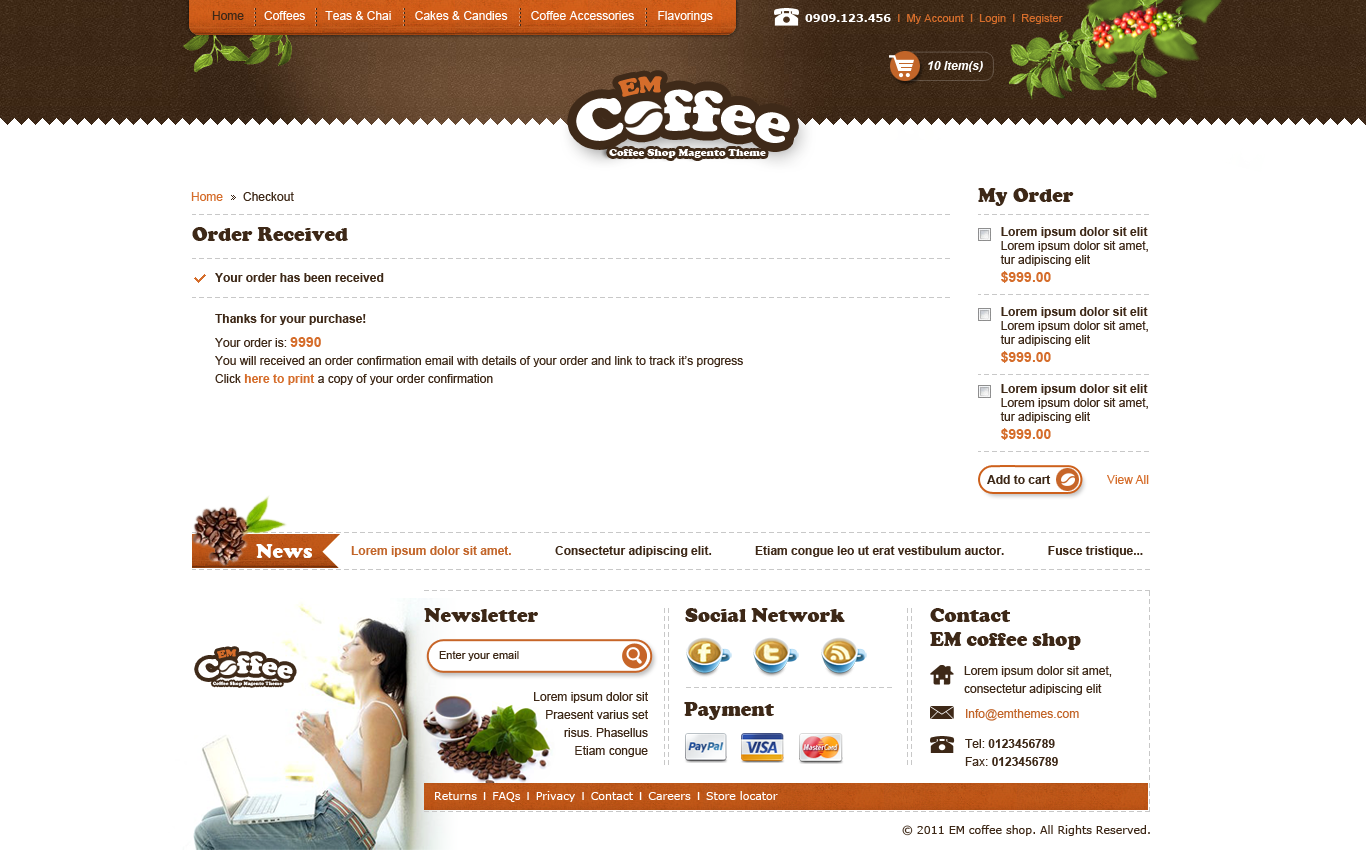
<style>
.page{position:relative;width:1366px;height:850px;background:#ffffff}
.page>*{position:absolute;margin:0}
.t1{font:12px "ArialMT";color:#fefefe}
.t2{font:12px "ArialMT";color:#3d2817}
.t3{font:11px "ArialMT";color:#d56d2b}
.t4{font:11px "Verdana-Bold";color:#ffffff}
.t5{font:12px "Arial-BoldItalicMT";color:#ffffff}
.t6{font:12px "ArialMT";color:#d56d2b}
.t7{font:20px "CooperBlack";color:#3d2817}
.t8{font:12px/14px "ArialMT";color:#3d2817}
.t9{font:12px/14px "Arial-BoldMT";color:#3d2817}
.t10{font:14px/18px "Arial-BoldMT";color:#d56d2b}
.t11{font:12px "Arial-BoldMT";color:#3d2817}
.t12{font:12px/18px "ArialMT";color:#3d2817}
.t13{font:12px/24px "Arial-BoldMT";color:#3d2817}
.t14{font:12px/24px "ArialMT";color:#3d2817}
.t15{font:14px/24px "Arial-BoldMT";color:#d56d2b}
.t16{font:12px/18px "Arial-BoldMT";color:#d56d2b}
.t17{font:20px "CooperBlack";color:#ffffff}
.t18{font:12px "Arial-BoldMT";color:#c26529}
.t19{font:20px/24px "CooperBlack";color:#3d2817}
.t20{font:11px "ArialMT";color:#3d2817}
.t21{font:12px/30px "ArialMT";color:#c26529}
.t22{font:12px/30px "ArialMT";color:#3d2817}
.t23{font:12px/30px "Arial-BoldMT";color:#3d2817}
.t24{font:12px/18px "Arial-BoldMT";color:#3d2817}
.t25{font:11px "Verdana";color:#ffffff}
.t26{font:11px "ArialMT";color:#ffffff}
.t27{font:11px "Verdana";color:#3d2817}
</style>
<div class="page">
<p class="t1" style="left:212px;top:11px;width:501px;height:11px"><span class="t2">Home</span>      Coffees      Teas &amp; Chai       Cakes &amp; Candies       Coffee Accessories       Flavorings</p>
<p class="t3" style="left:805px;top:14px;width:258px;height:10px"><span class="t4">0909.123.456</span>  I  My Account  I  Login  I  Register</p>
<p class="t5" style="left:928px;top:61px;width:55px;height:11px">10 Item(s)</p>
<p class="t2" style="left:191px;top:192px;width:103px;height:9px"><span class="t6">Home</span>      Checkout</p>
<p class="t7" style="left:978px;top:188px;width:96px;height:18px">My Order</p>
<p class="t7" style="left:192px;top:227px;width:156px;height:14px">Order Received</p>
<p class="t8" style="left:1000px;top:227px;width:148px;height:56px"><span class="t9">Lorem ipsum dolor sit elit<br></span>Lorem ipsum dolor sit amet,<br>tur adipiscing elit<br><span class="t10">$999.00</span></p>
<p class="t11" style="left:215px;top:273px;width:169px;height:9px">Your order has been received</p>
<p class="t12" style="left:215px;top:314px;width:528px;height:71px"><span class="t13">Thanks for your purchase!<br></span><span class="t14">Your order is: </span><span class="t15">9990<br></span>You will received an order confirmation email with details of your order and link to track it’s progress<br>Click <span class="t16">here to print</span> a copy of your order confirmation</p>
<p class="t8" style="left:1000px;top:307px;width:148px;height:56px"><span class="t9">Lorem ipsum dolor sit elit<br></span>Lorem ipsum dolor sit amet,<br>tur adipiscing elit<br><span class="t10">$999.00</span></p>
<p class="t8" style="left:1000px;top:384px;width:148px;height:56px"><span class="t9">Lorem ipsum dolor sit elit<br></span>Lorem ipsum dolor sit amet,<br>tur adipiscing elit<br><span class="t10">$999.00</span></p>
<p class="t11" style="left:987px;top:475px;width:64px;height:9px">Add to cart</p>
<p class="t6" style="left:1107px;top:475px;width:42px;height:9px">View All</p>
<p class="t17" style="left:256px;top:544px;width:56px;height:14px">News</p>
<p class="t11" style="left:351px;top:546px;width:792px;height:11px"><span class="t18">Lorem ipsum dolor sit amet.</span>             Consectetur adipiscing elit.             Etiam congue leo ut erat vestibulum auctor.             Fusce tristique...</p>
<p class="t7" style="left:424px;top:608px;width:114px;height:14px">Newsletter</p>
<p class="t7" style="left:685px;top:608px;width:160px;height:14px">Social Network</p>
<p class="t19" style="left:930px;top:608px;width:151px;height:42px">Contact<br>EM coffee shop</p>
<p class="t20" style="left:439px;top:651px;width:80px;height:10px">Enter your email</p>
<p class="t12" style="left:964px;top:666px;width:148px;height:29px">Lorem ipsum dolor sit amet, <br>consectetur adipiscing elit</p>
<p class="t12" style="left:534px;top:692px;width:114px;height:65px;text-align:right">Lorem ipsum dolor sit<br>Praesent varius set<br>risus. Phasellus<br>Etiam congue</p>
<p class="t7" style="left:684px;top:702px;width:90px;height:18px">Payment</p>
<p class="t21" style="left:965px;top:709px;width:114px;height:57px">Info@emthemes.com<br><span class="t22">Tel: </span><span class="t23">0123456789<br></span><span class="t12">Fax: </span><span class="t24">0123456789</span></p>
<p class="t25" style="left:435px;top:791px;width:343px;height:11px">Returns<span class="t26">  I  </span>FAQs<span class="t26">  I  </span>Privacy<span class="t26">  I  </span>Contact<span class="t26">  I  </span>Careers<span class="t26">  I  </span>Store locator</p>
<p class="t27" style="left:902px;top:825px;width:248px;height:11px">© 2011 EM coffee shop. All Rights Reserved.</p>
</div>
